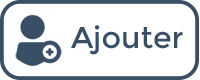
<style>
.page{position:relative;width:200px;height:80px;background:#ffffff}
.page>*{position:absolute;margin:0}
.t1{font:30px "Montserrat-Regular";color:#384f66}
</style>
<div class="page">
<p class="t1" style="left:71px;top:25px;width:112px;height:30px">Ajouter</p>
</div>
